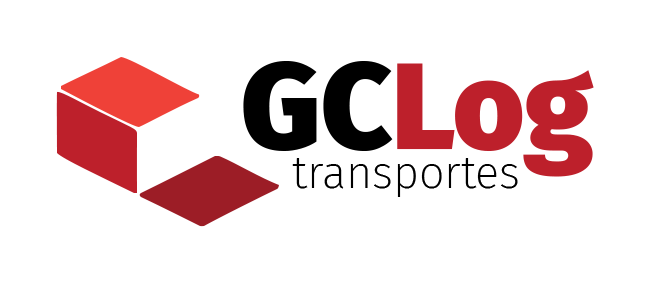
<style>
.page{position:relative;width:652px;height:283px;background:#ffffff}
.page>*{position:absolute;margin:0}
.t1{font:122px "FiraSans-Black";color:#bd202b}
.t2{font:122px "FiraSans-Black";color:#000000}
.t3{font:45px "FiraSans-ExtraLight";color:#000000}
</style>
<div class="page">
<p class="t1" style="left:243px;top:61px;width:351px;height:116px"><span class="t2">GC</span>Log</p>
<p class="t3" style="left:292px;top:158px;width:226px;height:39px">transportes</p>
</div>
